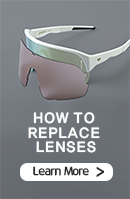
<style>
.page{position:relative;width:130px;height:199px}
.page>*{position:absolute;margin:0}
.t1{font:14.7px/14.7px "HaanYGodic25";letter-spacing:-0.075em;color:#ffffff;text-transform:uppercase}
.t2{font:12.1px "12LotteMartHappyBold";letter-spacing:-0.05em;color:#272728}
.t3{font:12.1px "12LotteMartHappyBold";letter-spacing:-0.05em;color:#272728;text-transform:uppercase}
.t4{font:17.3px "12LotteMartHappyBold";letter-spacing:-0.05em;color:#272728}
</style>
<div class="page">
<p class="t1" style="left:28px;top:112px;width:72px;height:41px;text-align:center">How to <br>replace <br>lenses</p>
<p class="t2" style="left:33px;top:166px;width:56px;height:10px"><span class="t3"> l</span>earn <span class="t3">m</span>ore</p>
<p class="t4" style="left:96px;top:166px;width:8px;height:12px">&gt;</p>
</div>
